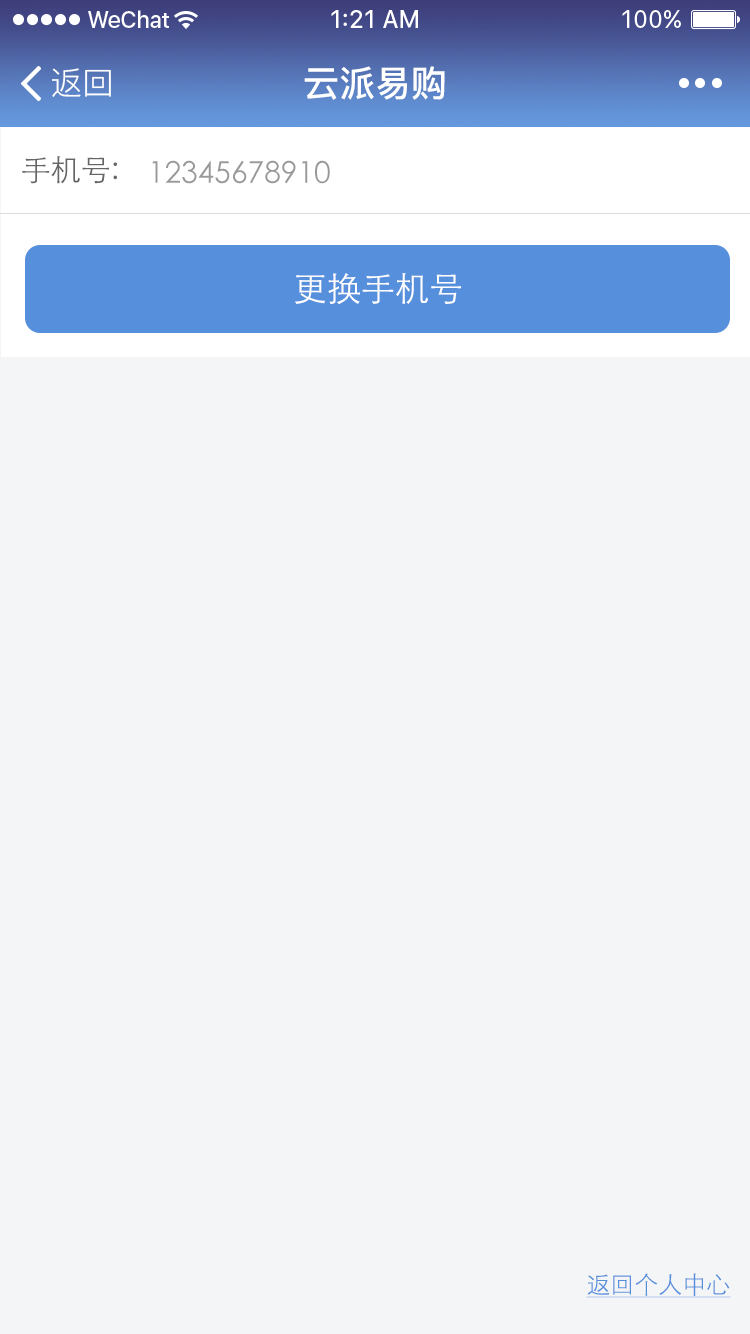
<style>
.page{position:relative;width:750px;height:1334px;background:#f4f5f6}
.page>*{position:absolute;margin:0}
.t1{font:32px "PingFang-SC-Regular";color:#ffffff}
.t2{font:36px "PingFang-SC-Bold";color:#ffffff}
.t3{font:30px "STXihei";color:#666666}
.t4{font:30px "STXihei";color:#999999}
.t5{font:34px "STXihei";color:#ffffff}
.t6{font:24px "STXihei";color:#568fdc;text-decoration:underline}
</style>
<div class="page">
<p class="t1" style="left:52px;top:68px;width:59px;height:29px">返回</p>
<p class="t2" style="left:304px;top:66px;width:141px;height:34px">云派易购</p>
<p class="t3" style="left:22px;top:156px;width:95px;height:28px">手机号:</p>
<p class="t4" style="left:152px;top:160px;width:178px;height:24px">12345678910</p>
<p class="t5" style="left:295px;top:273px;width:166px;height:32px">更换手机号</p>
<p class="t6" style="left:586px;top:1273px;width:145px;height:25px">返回个人中心</p>
</div>
